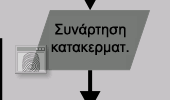
<style>
.page{position:relative;width:170px;height:100px;background:#c6c3c6}
.page>*{position:absolute;margin:0}
.t1{font:14.7px "ArialMT";color:#000000}
</style>
<div class="page">
<p class="t1" style="left:51px;top:23px;width:78px;height:32px;text-align:center">Συνάρτηση<br>κατακερματ.</p>
</div>
